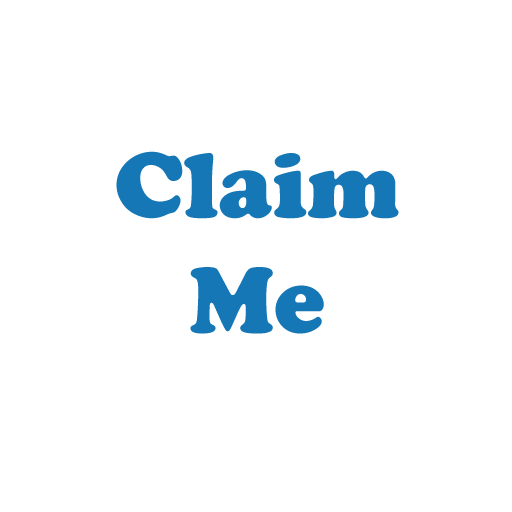
<style>
.page{position:relative;width:512px;height:512px;background:#ffffff}
.page>*{position:absolute;margin:0}
.t1{font:96px "CooperBlack";color:#1577b6}
</style>
<div class="page">
<p class="t1" style="left:116px;top:151px;width:283px;height:183px;text-align:center">Claim<br>Me</p>
</div>
